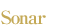
<style>
.page{position:relative;width:75px;height:27px;background:#ffffff}
.page>*{position:absolute;margin:0}
.t1{font:18px "RyuminPro-ExBold";letter-spacing:-0.08em;color:#c4a956}
</style>
<div class="page">
<p class="t1" style="left:1px;top:10px;width:45px;height:15px">Sonar</p>
</div>
